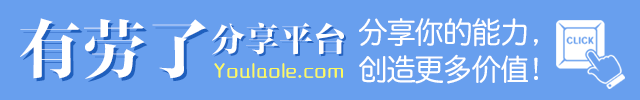
<style>
.page{position:relative;width:640px;height:100px;background:#689fee}
.page>*{position:absolute;margin:0}
.t1{font:65.6px "FZFYSJW--GB1-0";color:#ffffff}
.t2{font:65.6px "FZFYSJW--GB1-0"}
.t3{font:34.4px "FZFYSJW--GB1-0";color:#ffffff}
.t4{font:34.4px "FZFYSJW--GB1-0"}
.t5{font:30px/36.4px "QingYuan";letter-spacing:-0.04em;color:#ffffff}
.t6{font:30px/36.4px "QingYuan";letter-spacing:-0.5em;color:#ffffff}
.t7{font:17.7px "MFYaYuan_Noncommercial-Regular";letter-spacing:0.1em;color:#fefa5b;font-weight:bold}
</style>
<div class="page">
<p class="t1" style="left:20px;top:18px;width:186px;height:61px">有劳了</p>
<p class="t2" style="left:23px;top:21px;width:186px;height:61px">有劳了</p>
<p class="t3" style="left:212px;top:22px;width:132px;height:33px">分享平台</p>
<p class="t4" style="left:214px;top:24px;width:132px;height:33px">分享平台</p>
<p class="t5" style="left:359px;top:18px;width:179px;height:66px">分享你的能力<span class="t6">，<br></span>创造更多价值！</p>
<p class="t7" style="left:214px;top:63px;width:129px;height:15px">Youlaole.com</p>
</div>
